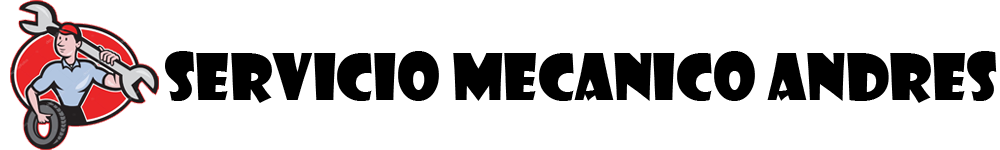
<style>
.page{position:relative;width:1000px;height:150px;background:#ffffff}
.page>*{position:absolute;margin:0}
.t1{font:62px "ShowcardGothic-Reg";color:#000000}
</style>
<div class="page">
<p class="t1" style="left:165px;top:51px;width:832px;height:52px">Servicio mecanico andres</p>
</div>
